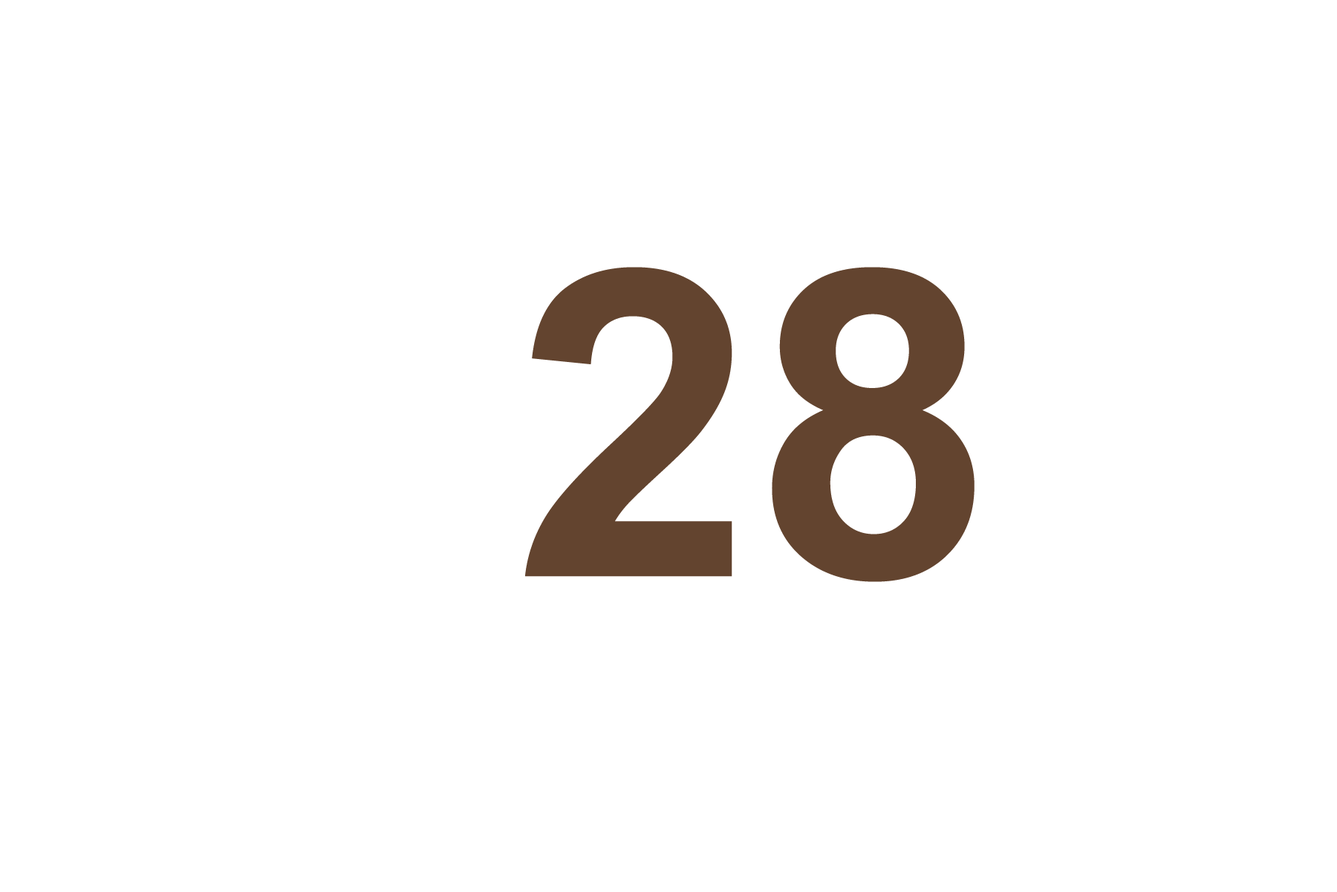
<style>
.page{position:relative;width:1337px;height:892px;background:#ffffff}
.page>*{position:absolute;margin:0}
.t1{font:429.6px "Arial-BoldMT";color:#63442f}
</style>
<div class="page">
<p class="t1" style="left:525px;top:267px;width:450px;height:315px">28</p>
</div>
